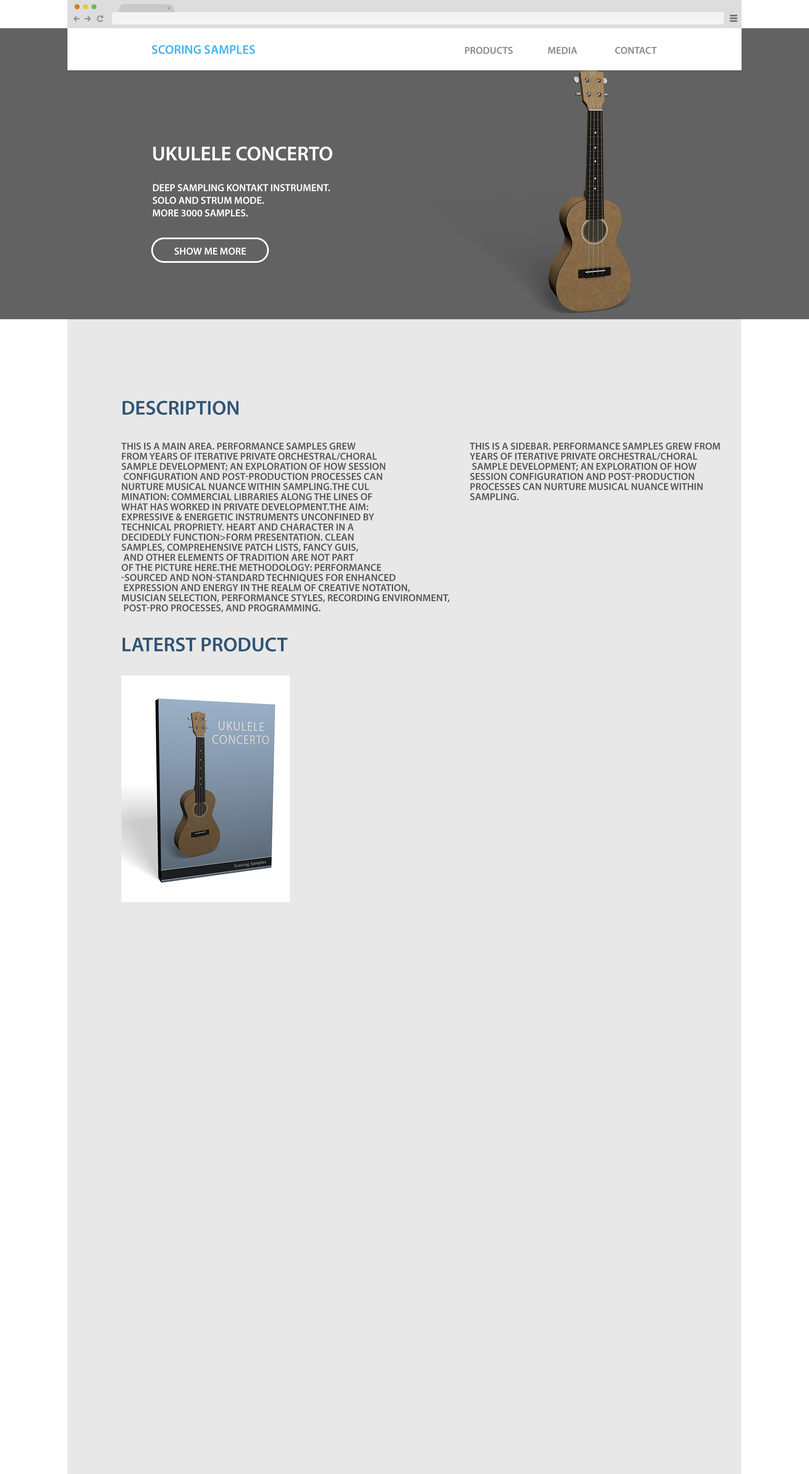
<style>
.page{position:relative;width:809px;height:1474px;background:#e8e8e8}
.page>*{position:absolute;margin:0}
.t1{font:9.8px "MavenProLight200-Regular"}
.t2{font:12.6px "MyriadPro-Semibold";color:#3eb5f1}
.t3{font:10.1px "MyriadPro-Semibold";color:#888888}
.t4{font:20.2px "MyriadPro-Semibold";color:#ffffff}
.t5{font:10.1px/12.6px "MyriadPro-Semibold";color:#ffffff}
.t6{font:10.1px "MyriadPro-Semibold";color:#ffffff;text-transform:uppercase}
.t7{font:20.2px "MyriadPro-Semibold";color:#2f5575;text-transform:uppercase}
.t8{font:10.1px/10.1px "MyriadPro-Semibold";color:#555555;text-transform:uppercase}
</style>
<div class="page">
<p class="t1" style="left:167px;top:7px;width:3px;height:2px;rotate:-45deg">+</p>
<p class="t2" style="left:152px;top:45px;width:103px;height:9px">SCORING SAMPLES</p>
<p class="t3" style="left:465px;top:47px;width:48px;height:7px">PRODUCTS</p>
<p class="t3" style="left:548px;top:47px;width:29px;height:7px">MEDIA</p>
<p class="t3" style="left:615px;top:47px;width:42px;height:7px">CONTACT</p>
<p class="t4" style="left:153px;top:147px;width:179px;height:14px">UKULELE CONCERTO</p>
<p class="t5" style="left:152px;top:184px;width:178px;height:33px">DEEP SAMPLING KONTAKT INSTRUMENT.<br>SOLO AND STRUM MODE.<br>MORE 3000 SAMPLES.</p>
<p class="t6" style="left:174px;top:248px;width:72px;height:7px">Show me more</p>
<p class="t7" style="left:123px;top:401px;width:115px;height:14px">Description</p>
<p class="t8" style="left:121px;top:443px;width:328px;height:170px">This is a main area. Performance Samples grew <br>from years of iterative private orchestral/choral <br>sample development; an exploration of how session<br> configuration and post-production processes can <br>nurture musical nuance within sampling.The cul<br>mination: commercial libraries along the lines of <br>what has worked in private development.The aim: <br>expressive &amp; energetic instruments unconfined by <br>technical propriety. Heart and character in a <br>decidedly function&gt;form presentation. Clean <br>samples, comprehensive patch lists, fancy GUIs,<br> and other elements of tradition are not part <br>of the picture here.The methodology: performance<br>-sourced and non-standard techniques for enhanced<br> expression and energy in the realm of creative notation, <br>musician selection, performance styles, recording environment,<br> post-pro processes, and programming.</p>
<p class="t8" style="left:470px;top:443px;width:250px;height:57px">This is a sidebar. Performance Samples grew from <br>years of iterative private orchestral/choral<br> sample development; an exploration of how <br>session configuration and post-production <br>processes can nurture musical nuance within <br>sampling.</p>
<p class="t7" style="left:123px;top:637px;width:165px;height:15px">Laterst product</p>
</div>
